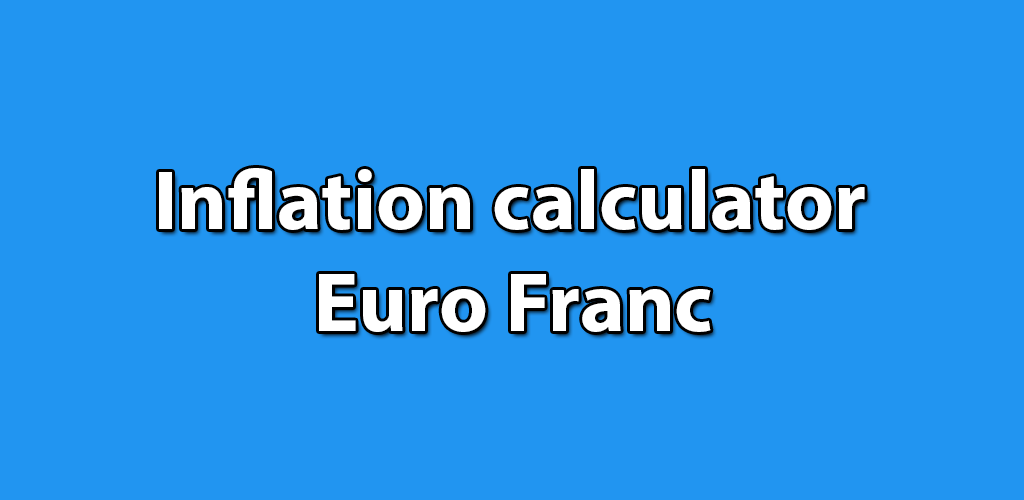
<style>
.page{position:relative;width:1024px;height:500px;background:#2195f1}
.page>*{position:absolute;margin:0}
.t1{font:85px "MyriadPro-Bold";color:#ffffff}
</style>
<div class="page">
<p class="t1" style="left:159px;top:168px;width:706px;height:164px;text-align:center">Inflation calculator <br>Euro Franc</p>
</div>
